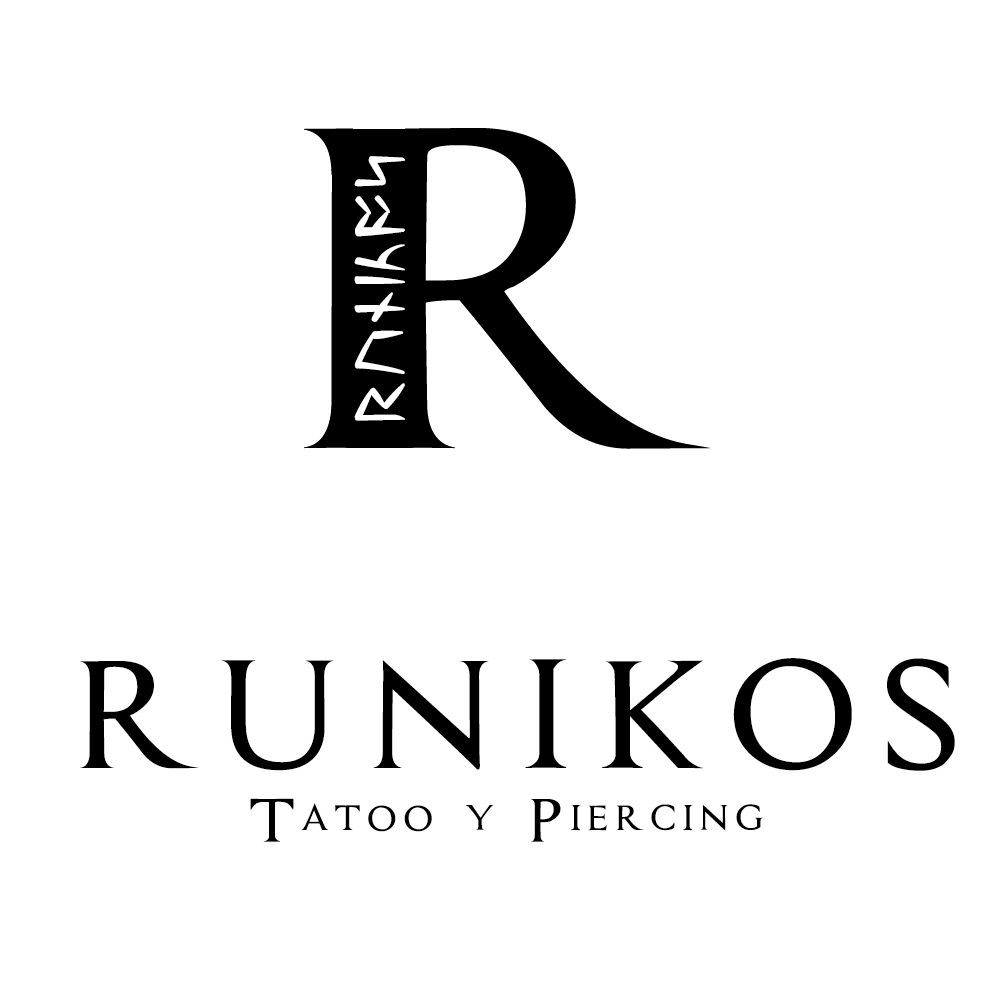
<style>
.page{position:relative;width:1000px;height:1000px;background:#ffffff}
.page>*{position:absolute;margin:0}
.t1{font:167px "Assassin$";letter-spacing:0.075em;color:#000000}
.t2{font:66.7px "Assassin$";letter-spacing:0.075em;color:#000000}
</style>
<div class="page">
<p class="t1" style="left:80px;top:658px;width:875px;height:113px">RUNIKOS</p>
<p class="t2" style="left:250px;top:798px;width:513px;height:44px">Tatoo y Piercing</p>
</div>
